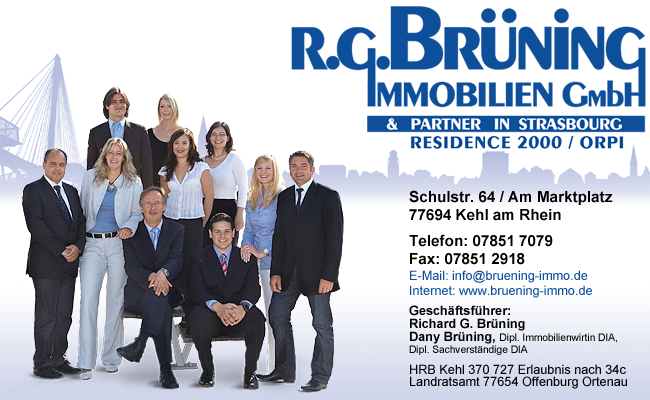
<style>
.page{position:relative;width:650px;height:400px;background:#ffffff}
.page>*{position:absolute;margin:0}
.t1{font:15.2px "Arial-BoldMT";color:#000000}
.t2{font:12.7px "ArialMT";color:#0e4f9a}
.t3{font:12.7px/12.7px "Arial-BoldMT";color:#000000}
.t4{font:10.2px/12.7px "ArialMT";color:#000000}
.t5{font:12.7px/12.7px "ArialMT";color:#000000}
</style>
<div class="page">
<p class="t1" style="left:409px;top:190px;width:218px;height:199px">Schulstr. 64 / Am Marktplatz<br>77694 Kehl am Rhein<br> <br>Telefon: 07851 7079<br>Fax: 07851 2918<br><span class="t2">E-Mail: info@bruening-immo.de <br>Internet: www.bruening-immo.de<br> <br></span><span class="t3">Geschäftsführer:<br>Richard G. Brüning<br>Dany Brüning, </span><span class="t4">Dipl. Immobilienwirtin DIA,<br>Dipl. Sachverständige DIA<br> <br></span><span class="t5">HRB Kehl 370 727 Erlaubnis nach 34c<br>Landratsamt 77654 Offenburg Ortenau</span></p>
</div>
